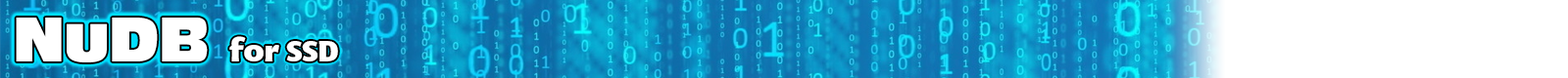
<style>
.page{position:relative;width:1568px;height:78px;background:#ffffff}
.page>*{position:absolute;margin:0}
.t1{font:58.8px "AntiqueOliveCompact-Regular";color:#ffffff}
.t2{font:58.8px "AntiqueOliveCompact-Regular";letter-spacing:-0.015em;color:#ffffff}
.t3{font:58.8px "AntiqueOliveCompact-Regular";letter-spacing:-0.01em;color:#ffffff}
.t4{font:29.4px "MEgalopolisExtra";color:#ffffff}
.t5{font:29.4px "MEgalopolisExtra";letter-spacing:-0.04em;color:#ffffff}
.t6{font:29.4px "MEgalopolisExtra";letter-spacing:-0.05em;color:#ffffff}
</style>
<div class="page">
<p class="t1" style="left:16px;top:18px;width:192px;height:45px"><span class="t2">N</span><span class="t3">u</span>DB</p>
<p class="t4" style="left:229px;top:36px;width:109px;height:26px">f<span class="t5">o</span>r S<span class="t6">S</span>D</p>
</div>
